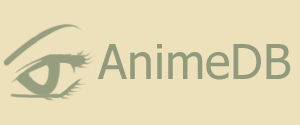
<style>
.page{position:relative;width:300px;height:125px;background:#ede1bb}
.page>*{position:absolute;margin:0}
.t1{font:48px "Tahoma";color:#7b896d}
</style>
<div class="page">
<p class="t1" style="left:97px;top:44px;width:194px;height:36px;opacity:0.8">AnimeDB</p>
</div>
